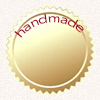
<style>
.page{position:relative;width:100px;height:100px}
.page>*{position:absolute;margin:0}
.t1{font:12px "MyriadPro-Regular";color:#9b0c32}
</style>
<div class="page">
<p class="t1" style="left:14px;top:13px;width:70px;height:25px">handmade</p>
</div>
